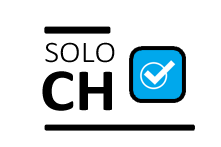
<style>
.page{position:relative;width:221px;height:147px;background:#ffffff}
.page>*{position:absolute;margin:0}
.t1{font:30px "Calibri-Light";color:#000000;scale:1.1 1}
.t2{font:60px "Calibri-Bold";color:#000000;scale:1.1 1}
</style>
<div class="page">
<p class="t1" style="left:45px;top:42px;width:70px;height:21px">SOLO</p>
<p class="t2" style="left:42px;top:71px;width:70px;height:40px">CH</p>
</div>
